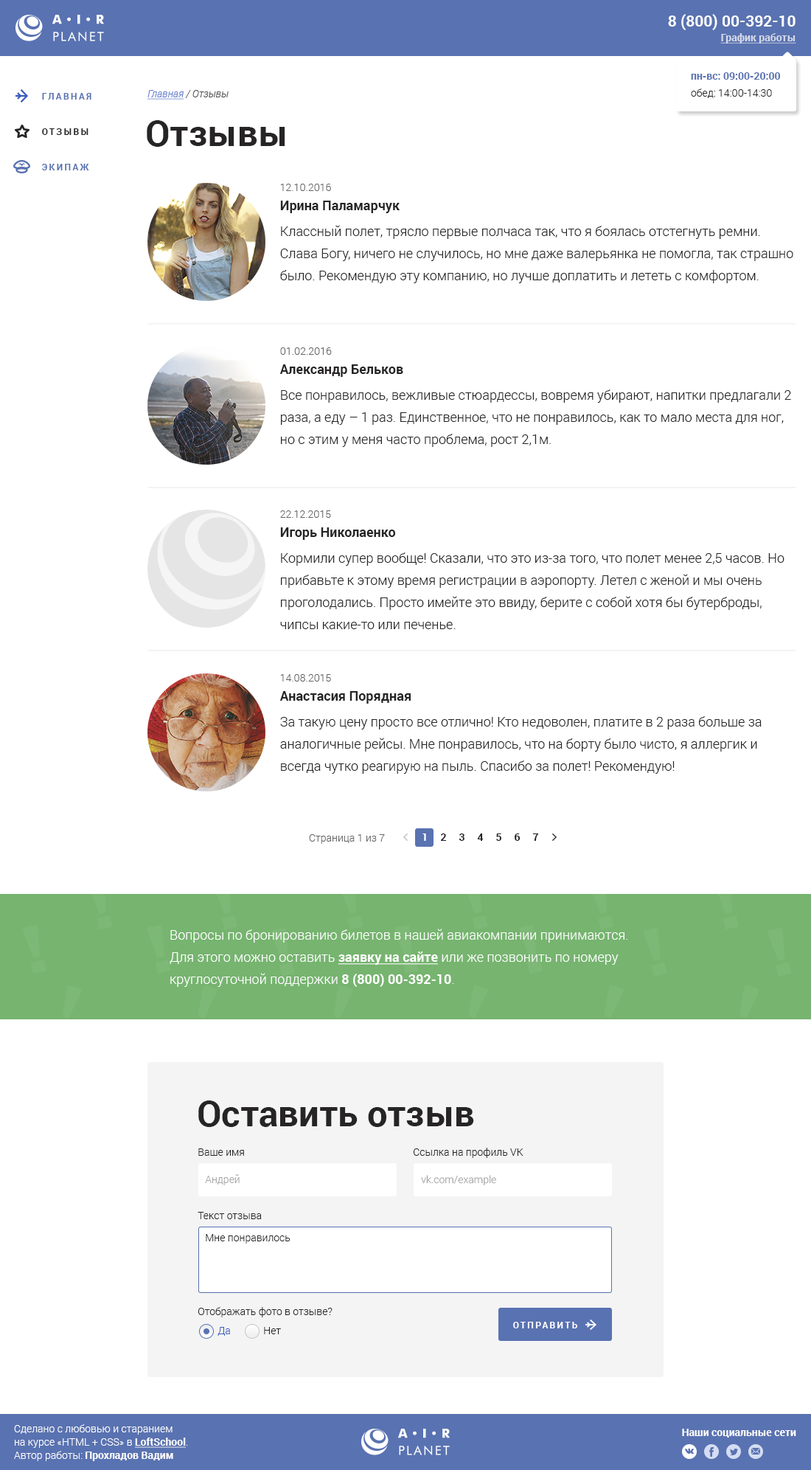
<style>
.page{position:relative;width:811px;height:1470px;background:#ffffff}
.page>*{position:absolute;margin:0}
.t1{font:15.5px "Roboto-Bold";color:#ffffff;text-transform:uppercase}
.t2{font:10.3px "Roboto-Bold";color:#d5dae9;text-decoration:underline}
.t3{font:10.3px/13.3px "Roboto-Bold";color:#5972b1}
.t4{font:10.3px/13.3px "Roboto-Light";color:#262424}
.t5{font:10.3px "Roboto-LightItalic"}
.t6{font:10.3px "Roboto-LightItalic";text-decoration:underline}
.t7{font:8.9px "Roboto-Bold";letter-spacing:0.2em;color:#5972b1;text-transform:uppercase}
.t8{font:36.1px "Roboto-Bold";color:#262424}
.t9{font:8.9px "Roboto-Bold";letter-spacing:0.2em;color:#262424;text-transform:uppercase}
.t10{font:13.3px/22.1px "Roboto-Light";color:#262424}
.t11{font:10.3px/15.5px "Roboto-Light";color:#656464}
.t12{font:13.3px/15.5px "Roboto-Bold";color:#262424}
.t13{font:10.3px "Roboto-Bold";color:#ffffff}
.t14{font:10.3px "Roboto-Bold";color:#262424}
.t15{font:10.3px "Roboto-Light";color:#656464}
.t16{font:13.3px/22.1px "Roboto-Light";color:#ffffff}
.t17{font:13.3px/22.1px "Roboto-Bold";color:#ffffff;text-decoration:underline}
.t18{font:13.3px/22.1px "Roboto-Bold";color:#ffffff}
.t19{font:10.3px "Roboto-Light";color:#262424}
.t20{font:10.3px "Roboto-Light";color:#a7a6a6}
.t21{font:8.9px "Roboto-Bold";letter-spacing:0.2em;color:#ffffff;text-transform:uppercase}
.t22{font:10.3px "Roboto-Light";color:#3a5bbf}
.t23{font:10.3px/13.3px "Roboto-Light";color:#ffffff}
.t24{font:10.3px/13.3px "Roboto-Bold";color:#ffffff;text-decoration:underline}
.t25{font:10.3px/13.3px "Roboto-Bold";color:#ffffff}
</style>
<div class="page">
<p class="t1" style="left:668px;top:14px;width:128px;height:16px">8 (800) 00-392-10</p>
<p class="t2" style="left:721px;top:33px;width:76px;height:11px">График работы</p>
<p class="t3" style="left:691px;top:72px;width:89px;height:26px">пн-вс: 09:00-20:00<br><span class="t4">обед: 14:00-14:30</span></p>
<p class="t5" style="left:148px;top:90px;width:81px;height:10px"><span class="t6">Главная</span> / Отзывы</p>
<p class="t7" style="left:42px;top:93px;width:49px;height:7px">Главная</p>
<p class="t8" style="left:147px;top:120px;width:138px;height:27px">Отзывы</p>
<p class="t9" style="left:42px;top:128px;width:47px;height:7px">Отзывы</p>
<p class="t7" style="left:42px;top:164px;width:47px;height:6px">Экипаж</p>
<p class="t10" style="left:280px;top:184px;width:514px;height:99px"><span class="t11">12.10.2016<br></span><span class="t12">Ирина Паламарчук<br></span>Классный полет, трясло первые полчаса так, что я боялась отстегнуть ремни. Слава Богу, ничего не случилось, но мне даже валерьянка не помогла, так страшно было. Рекомендую эту компанию, но лучше доплатить и лететь с комфортом.</p>
<p class="t10" style="left:280px;top:347px;width:511px;height:100px"><span class="t11">01.02.2016<br></span><span class="t12">Александр Бельков<br></span>Все понравилось, вежливые стюардессы, вовремя убирают, напитки предлагали 2 раза, а еду – 1 раз. Единственное, что не понравилось, как то мало места для ног, но с этим у меня часто проблема, рост 2,1м.</p>
<p class="t10" style="left:280px;top:510px;width:505px;height:119px"><span class="t11">22.12.2015<br></span><span class="t12">Игорь Николаенко<br></span>Кормили супер вообще! Сказали, что это из-за того, что полет менее 2,5 часов. Но прибавьте к этому время регистрации в аэропорту. Летел с женой и мы очень проголодались. Просто имейте это ввиду, берите с собой хотя бы бутерброды, чипсы какие-то или печенье.</p>
<p class="t10" style="left:280px;top:674px;width:482px;height:100px"><span class="t11">14.08.2015<br></span><span class="t12">Анастасия Порядная<br></span>За такую цену просто все отлично! Кто недоволен, платите в 2 раза больше за аналогичные рейсы. Мне понравилось, что на борту было чисто, я аллергик и всегда чутко реагирую на пыль. Спасибо за полет! Рекомендую!</p>
<p class="t13" style="left:423px;top:833px;width:3px;height:8px">1</p>
<p class="t14" style="left:441px;top:833px;width:6px;height:8px">2</p>
<p class="t14" style="left:459px;top:833px;width:6px;height:8px">3</p>
<p class="t14" style="left:477px;top:833px;width:7px;height:8px">4</p>
<p class="t14" style="left:496px;top:833px;width:6px;height:8px">5</p>
<p class="t14" style="left:515px;top:833px;width:6px;height:8px">6</p>
<p class="t14" style="left:532px;top:833px;width:7px;height:8px">7</p>
<p class="t15" style="left:309px;top:834px;width:76px;height:10px">Страница 1 из 7</p>
<p class="t16" style="left:170px;top:929px;width:458px;height:58px">Вопросы по бронированию билетов в нашей авиакомпании принимаются. Для этого можно оставить <span class="t17">заявку на сайте</span> или же позвонить по номеру круглосуточной поддержки <span class="t18">8 (800) 00-392-10</span>.</p>
<p class="t8" style="left:198px;top:1100px;width:276px;height:27px">Оставить отзыв</p>
<p class="t19" style="left:198px;top:1148px;width:46px;height:8px">Ваше имя</p>
<p class="t19" style="left:414px;top:1148px;width:110px;height:10px">Ссылка на профиль VK</p>
<p class="t20" style="left:205px;top:1174px;width:35px;height:11px">Андрей</p>
<p class="t20" style="left:421px;top:1175px;width:75px;height:10px">vk.com/example</p>
<p class="t19" style="left:198px;top:1212px;width:64px;height:7px">Текст отзыва</p>
<p class="t19" style="left:206px;top:1234px;width:85px;height:9px">Мне понравилось</p>
<p class="t19" style="left:198px;top:1307px;width:135px;height:10px">Отображать фото в отзыве?</p>
<p class="t21" style="left:513px;top:1322px;width:64px;height:6px">Отправить</p>
<p class="t22" style="left:218px;top:1327px;width:12px;height:9px">Да</p>
<p class="t19" style="left:264px;top:1327px;width:17px;height:7px">Нет</p>
<p class="t23" style="left:14px;top:1424px;width:174px;height:37px">Сделано с любовью и старанием<br>на курсе «HTML + CSS» в <span class="t24">LoftSchool</span>.<br>Автор работы: <span class="t25">Прохладов Вадим</span></p>
<p class="t13" style="left:682px;top:1429px;width:115px;height:8px">Наши социальные сети</p>
</div>
